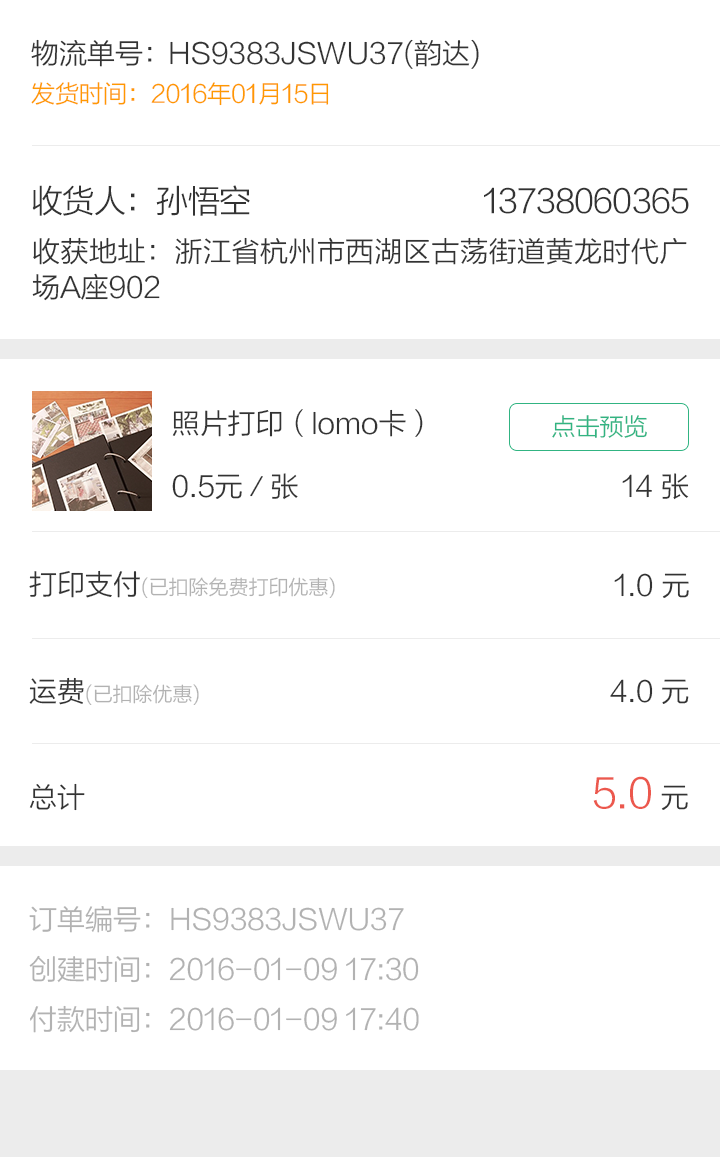
<style>
.page{position:relative;width:720px;height:1157px;background:#ffffff}
.page>*{position:absolute;margin:0}
.t1{font:28px "FZLTXIHJW--GB1-0";color:#333333}
.t2{font:24px "FZLTXIHJW--GB1-0";color:#ff9900}
.t3{font:32px "FZLTXIHJW--GB1-0";letter-spacing:-0.02em;color:#333333}
.t4{font:28px/36px "FZLTXIHJW--GB1-0";color:#333333}
.t5{font:24px "FZLTXIHJW--GB1-0";color:#31b482}
.t6{font:20px "FZLTXIHJW--GB1-0";color:#b2b2b2}
.t7{font:40px "FZLTXIHJW--GB1-0";color:#ec584d}
.t8{font:28px "FZLTXIHJW--GB1-0";color:#b2b2b2}
</style>
<div class="page">
<p class="t1" style="left:31px;top:39px;width:121px;height:28px">物流单号：</p>
<p class="t1" style="left:170px;top:39px;width:309px;height:30px">HS9383JSWU37(韵达)</p>
<p class="t2" style="left:31px;top:82px;width:298px;height:24px">发货时间：2016年01月15日</p>
<p class="t3" style="left:32px;top:185px;width:218px;height:31px">收货人：孙悟空</p>
<p class="t3" style="left:484px;top:187px;width:205px;height:27px">13738060365</p>
<p class="t4" style="left:32px;top:237px;width:655px;height:64px;text-align:justify">收获地址：浙江省杭州市西湖区古荡街道黄龙时代广场A座902</p>
<p class="t1" style="left:172px;top:409px;width:251px;height:28px">照片打印（lomo卡）</p>
<p class="t5" style="left:552px;top:415px;width:95px;height:23px">点击预览</p>
<p class="t1" style="left:172px;top:473px;width:126px;height:27px">0.5元／张</p>
<p class="t1" style="left:622px;top:473px;width:67px;height:27px">14 张</p>
<p class="t6" style="left:29px;top:570px;width:306px;height:28px"><span class="t1">打印支付</span>(已扣除免费打印优惠)</p>
<p class="t1" style="left:614px;top:573px;width:75px;height:25px">1.0 元</p>
<p class="t6" style="left:29px;top:677px;width:170px;height:28px"><span class="t1">运费</span>(已扣除优惠)</p>
<p class="t1" style="left:610px;top:679px;width:79px;height:25px">4.0 元</p>
<p class="t1" style="left:29px;top:783px;width:56px;height:28px">总计</p>
<p class="t7" style="left:593px;top:776px;width:95px;height:34px">5.0 <span class="t1">元</span></p>
<p class="t8" style="left:29px;top:906px;width:375px;height:27px">订单编号：HS9383JSWU37</p>
<p class="t8" style="left:29px;top:955px;width:390px;height:28px">创建时间：2016-01-09 17:30</p>
<p class="t8" style="left:30px;top:1005px;width:389px;height:28px">付款时间：2016-01-09 17:40</p>
</div>
